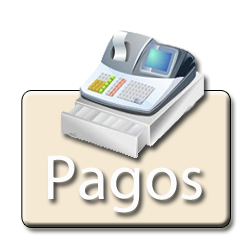
<style>
.page{position:relative;width:250px;height:250px;background:#ffffff}
.page>*{position:absolute;margin:0}
.t1{font:64px "MyriadPro-Regular";color:#fcfcfc}
</style>
<div class="page">
<p class="t1" style="left:47px;top:155px;width:155px;height:58px">Pagos</p>
</div>
